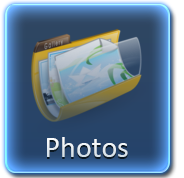
<style>
.page{position:relative;width:184px;height:178px}
.page>*{position:absolute;margin:0}
.t1{font:30px "Calibri";color:#e6ecf1}
</style>
<div class="page">
<p class="t1" style="left:47px;top:137px;width:81px;height:20px">Photos</p>
</div>
